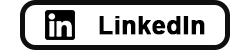
<style>
.page{position:relative;width:230px;height:50px;background:#ffffff}
.page>*{position:absolute;margin:0}
.t1{font:25px "Arial-BoldMT";color:#000000;font-weight:bold}
</style>
<div class="page">
<p class="t1" style="left:99px;top:16px;width:106px;height:19px">LinkedIn</p>
</div>
